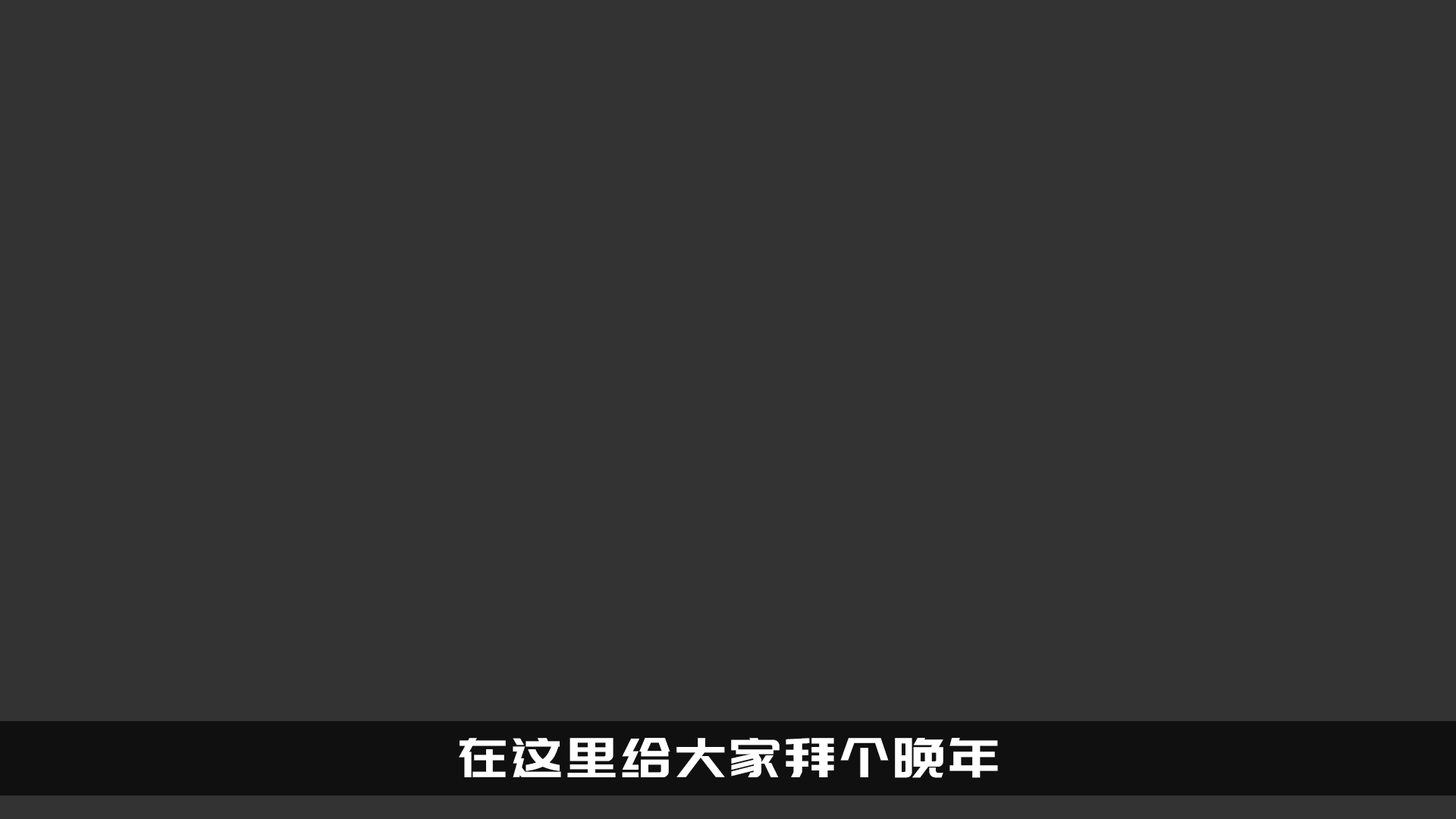
<style>
.page{position:relative;width:1456px;height:819px;background:#333333}
.page>*{position:absolute;margin:0}
.t1{font:54.6px "PangMenZhengDao-3";color:#ffffff}
</style>
<div class="page">
<p class="t1" style="left:459px;top:738px;width:539px;height:40px">在这里给大家拜个晚年</p>
</div>
